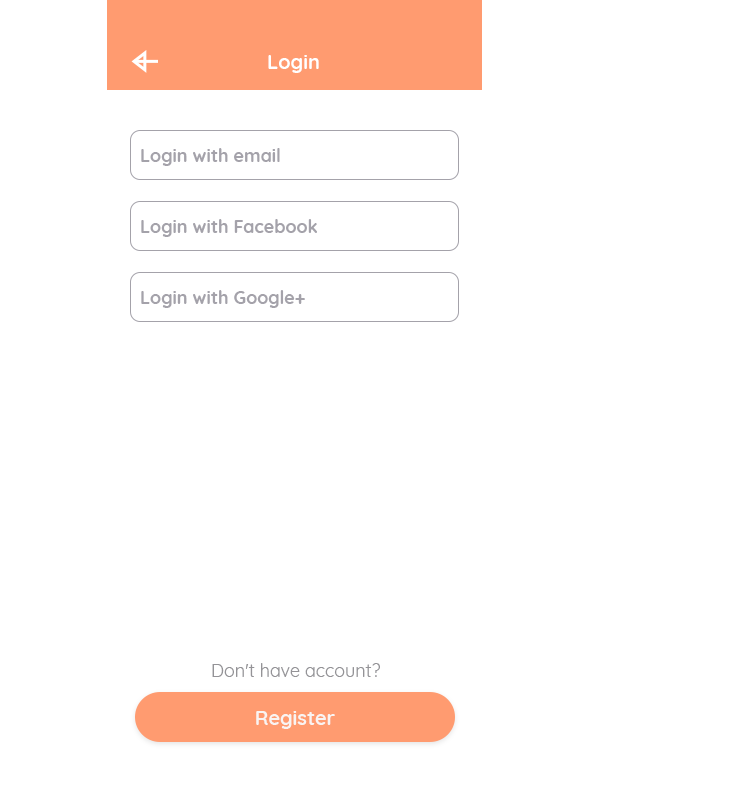
<style>
.page{position:relative;width:743px;height:812px;background:#ffffff}
.page>*{position:absolute;margin:0}
.t1{font:20px "Quicksand-Bold";color:#ffffff}
.t2{font:18px "Quicksand-Bold";color:#a4a2aa}
.t3{font:18px "Quicksand-Regular";color:#949397}
.t4{font:20px "Quicksand-Bold";color:#f9f4f2}
</style>
<div class="page">
<p class="t1" style="left:268px;top:55px;width:51px;height:18px">Login</p>
<p class="t2" style="left:141px;top:148px;width:139px;height:18px">Login with email</p>
<p class="t2" style="left:141px;top:219px;width:176px;height:18px">Login with Facebook</p>
<p class="t2" style="left:141px;top:290px;width:164px;height:18px">Login with Google+</p>
<p class="t3" style="left:212px;top:663px;width:168px;height:14px">Don't have account?</p>
<p class="t4" style="left:256px;top:711px;width:79px;height:18px">Register</p>
</div>
